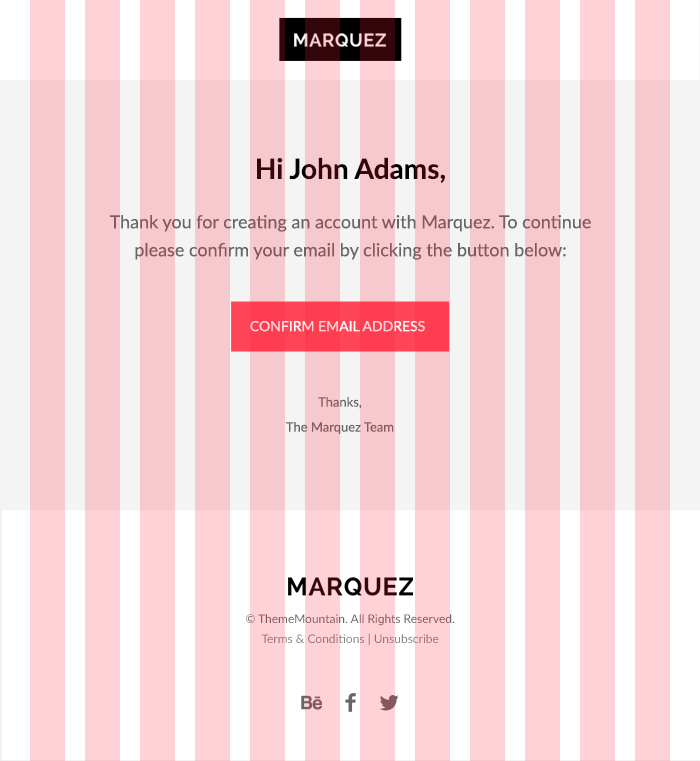
<style>
.page{position:relative;width:700px;height:761px;background:#f6c9cf}
.page>*{position:absolute;margin:0}
.t1{font:28px "Lato-Bold";color:#33060b}
.t2{font:18px/28px "Lato-Regular"}
.t3{font:14px "Lato-Regular";text-transform:uppercase}
.t4{font:13px/25px "Lato-Regular"}
.t5{font:12px/20px "Lato-Regular";color:#666666}
.t6{font:12px/20px "Lato-Regular";color:#888888}
</style>
<div class="page">
<p class="t1" style="left:257px;top:157px;width:188px;height:26px">Hi John Adams,</p>
<p class="t2" style="left:109px;top:215px;width:482px;height:45px;text-align:center">Thank you for creating an account with Marquez. To continue<br>please confirm your email by clicking the button below:</p>
<p class="t3" style="left:250px;top:321px;width:175px;height:11px">Confirm email address</p>
<p class="t4" style="left:286px;top:397px;width:108px;height:37px;text-align:center">Thanks, <br>The Marquez Team</p>
<p class="t5" style="left:246px;top:614px;width:209px;height:31px;text-align:center">© ThemeMountain. All Rights Reserved. <br><span class="t6">Terms &amp; Conditions | Unsubscribe</span></p>
</div>
